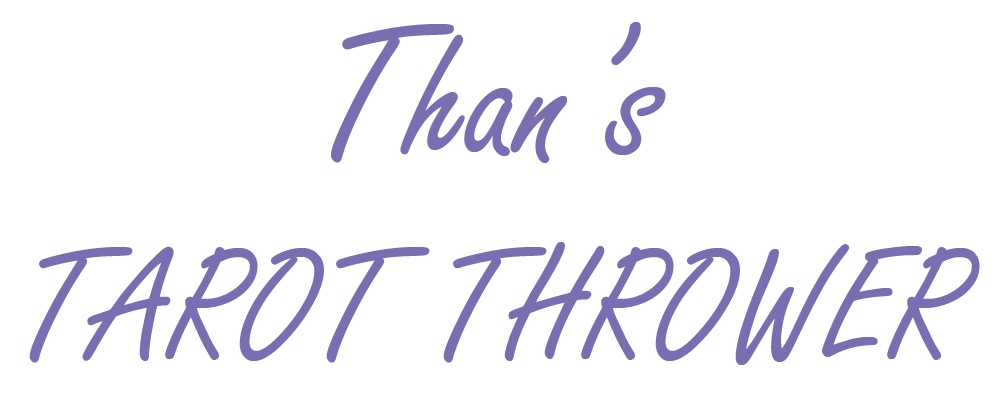
<style>
.page{position:relative;width:1000px;height:400px;background:#ffffff}
.page>*{position:absolute;margin:0}
.t1{font:166.7px "FreestyleScript-Regular";color:#7a6db1}
.t2{font:200px "FreestyleScript-Regular";color:#7a6db1}
</style>
<div class="page">
<p class="t1" style="left:29px;top:22px;width:951px;height:343px;text-align:center"><span class="t2">Than’s<br></span>TAROT THROWER</p>
</div>
